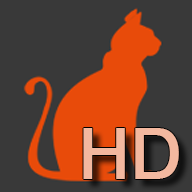
<style>
.page{position:relative;width:192px;height:192px;background:#393939}
.page>*{position:absolute;margin:0}
.t1{font:70px "ArialMT";color:#f3b89f;font-weight:bold}
</style>
<div class="page">
<p class="t1" style="left:83px;top:128px;width:96px;height:51px">HD</p>
</div>
